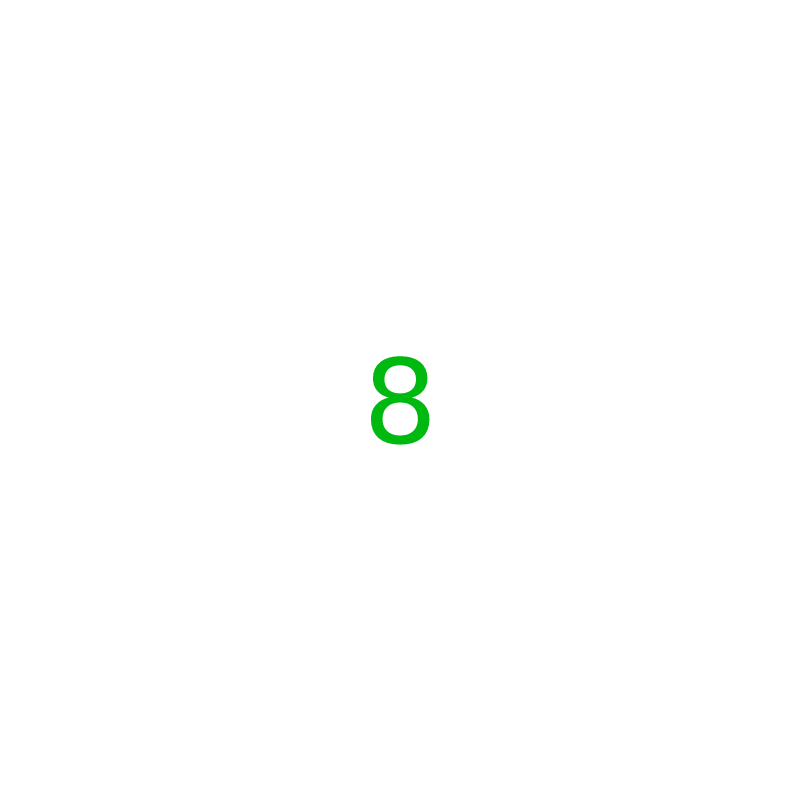
<style>
.page{position:relative;width:800px;height:800px;background:#ffffff}
.page>*{position:absolute;margin:0}
.t1{font:117px "DejaVuSans";color:#00b910}
</style>
<div class="page">
<p class="t1" style="left:370px;top:356px;width:60px;height:89px">8</p>
</div>
